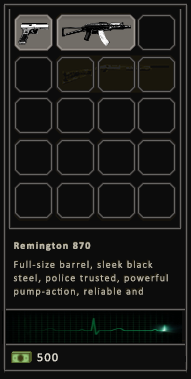
<style>
.page{position:relative;width:191px;height:379px;background:#0c0c0c}
.page>*{position:absolute;margin:0}
.t1{font:10px/13.4px "Calibri-Light";letter-spacing:0.115em;color:#bcb7a8}
.t2{font:10px/17.3px "Calibri-Bold";letter-spacing:0.115em;color:#bcb7a8}
.t3{font:12px "Calibri";letter-spacing:0.115em;color:#dfdcd1}
</style>
<div class="page">
<p class="t1" style="left:13px;top:242px;width:155px;height:55px"><span class="t2">Remington 870<br><br></span>Full-size barrel, sleek black steel, police trusted, powerful pump-action, reliable and rugged, ultimate street enforcer.</p>
<p class="t3" style="left:37px;top:353px;width:21px;height:9px">500</p>
</div>
